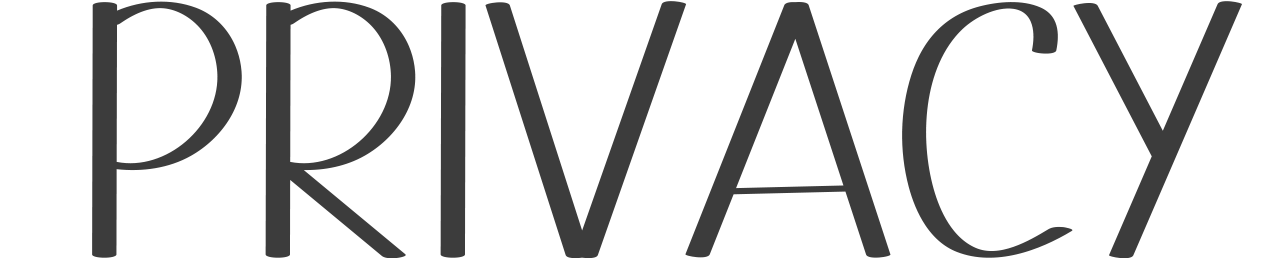
<style>
.page{position:relative;width:1270px;height:258px;background:#ffffff}
.page>*{position:absolute;margin:0}
.t1{font:533.4px "MinimalistRegular";color:#3c3c3c}
</style>
<div class="page">
<p class="t1" style="left:92px;top:1px;width:1150px;height:258px">PrivAcy</p>
</div>
